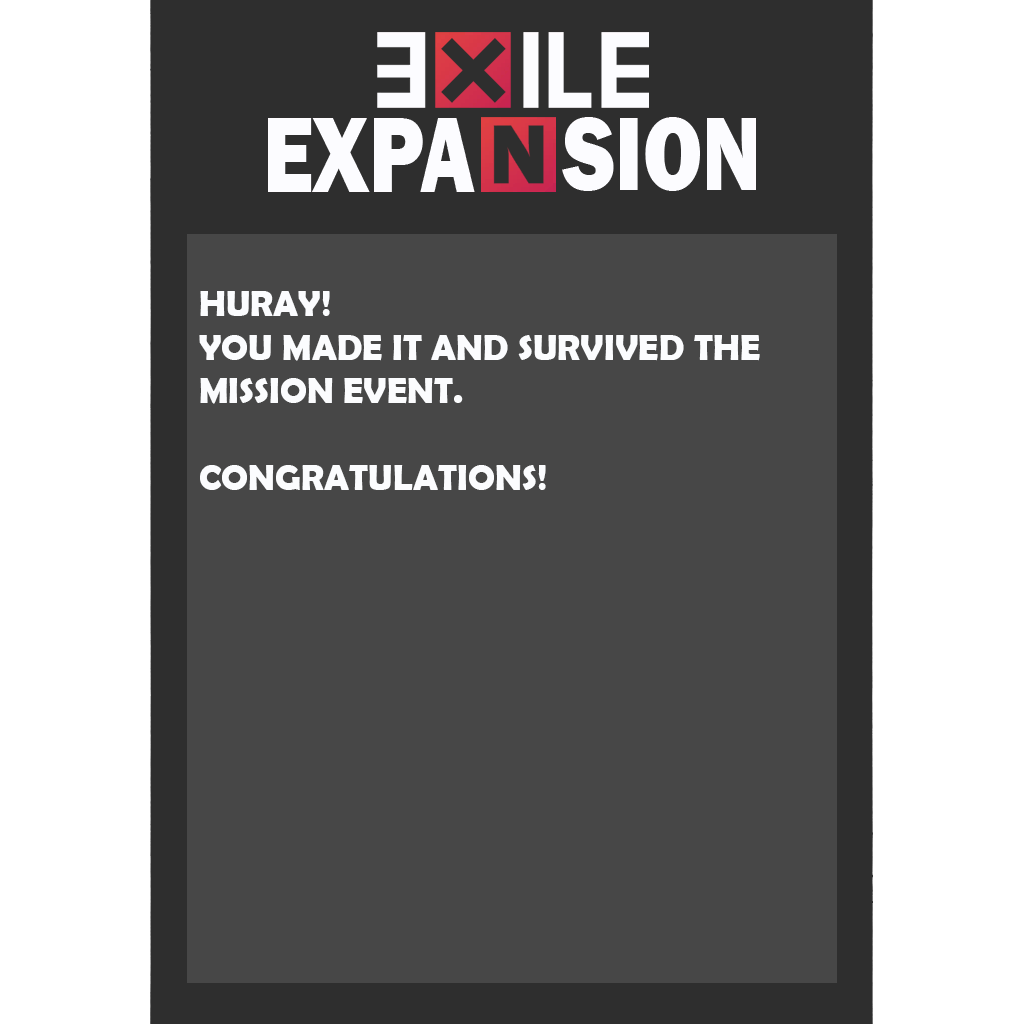
<style>
.page{position:relative;width:1024px;height:1024px;background:#474747}
.page>*{position:absolute;margin:0}
.t1{font:36.2px "BerlinSansFBDemi-Bold";color:#fbfcfe}
</style>
<div class="page">
<p class="t1" style="left:199px;top:291px;width:561px;height:199px">HURAY!<br>YOU MADE IT AND SURVIVED THE MISSION EVENT.<br><br>CONGRATULATIONS!</p>
</div>
